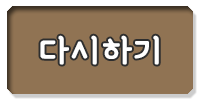
<style>
.page{position:relative;width:200px;height:100px;background:#907353}
.page>*{position:absolute;margin:0}
.t1{font:48.9px "YanoljaYacheR";color:#ffffff}
</style>
<div class="page">
<p class="t1" style="left:40px;top:35px;width:119px;height:30px">다시하기</p>
</div>
